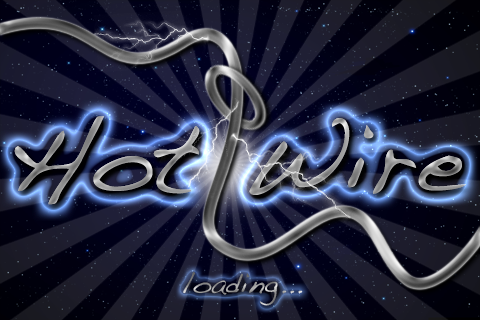
<style>
.page{position:relative;width:480px;height:320px}
.page>*{position:absolute;margin:0}
.t1{font:100px "Handwriting-Dakota"}
.t2{font:30px "Handwriting-Dakota"}
</style>
<div class="page">
<p class="t1" style="left:14px;top:116px;width:452px;height:89px">Hot Wire</p>
<p class="t1" style="left:14px;top:116px;width:452px;height:89px">Hot Wire</p>
<p class="t2" style="left:183px;top:272px;width:120px;height:34px">loading...</p>
</div>
